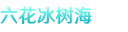
<style>
.page{position:relative;width:128px;height:32px;background:#ffffff}
.page>*{position:absolute;margin:0}
.t1{font:18.7px "HYWenHei-FEW";letter-spacing:0.025em}
</style>
<div class="page">
<p class="t1" style="left:0px;top:6px;width:92px;height:18px">六花冰树海</p>
</div>
